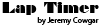
<style>
.page{position:relative;width:100px;height:27px;background:#ffffff}
.page>*{position:absolute;margin:0}
.t1{font:8px "MyriadPro-Regular";color:#000000}
.t2{font:14px "Braggadocio";color:#000000}
</style>
<div class="page">
<p class="t1" style="left:2px;top:2px;width:97px;height:23px;text-align:right"><span class="t2">Lap Timer<br></span>by Jeremy Cowgar</p>
</div>
